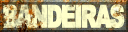
<style>
.page{position:relative;width:128px;height:32px}
.page>*{position:absolute;margin:0}
.t1{font:30.7px "Arial-Black";letter-spacing:-0.1em;color:#ffffc9;text-transform:uppercase;font-weight:bold;scale:0.67 1}
</style>
<div class="page">
<p class="t1" style="left:3px;top:4px;width:122px;height:24px">bandeiras</p>
</div>
